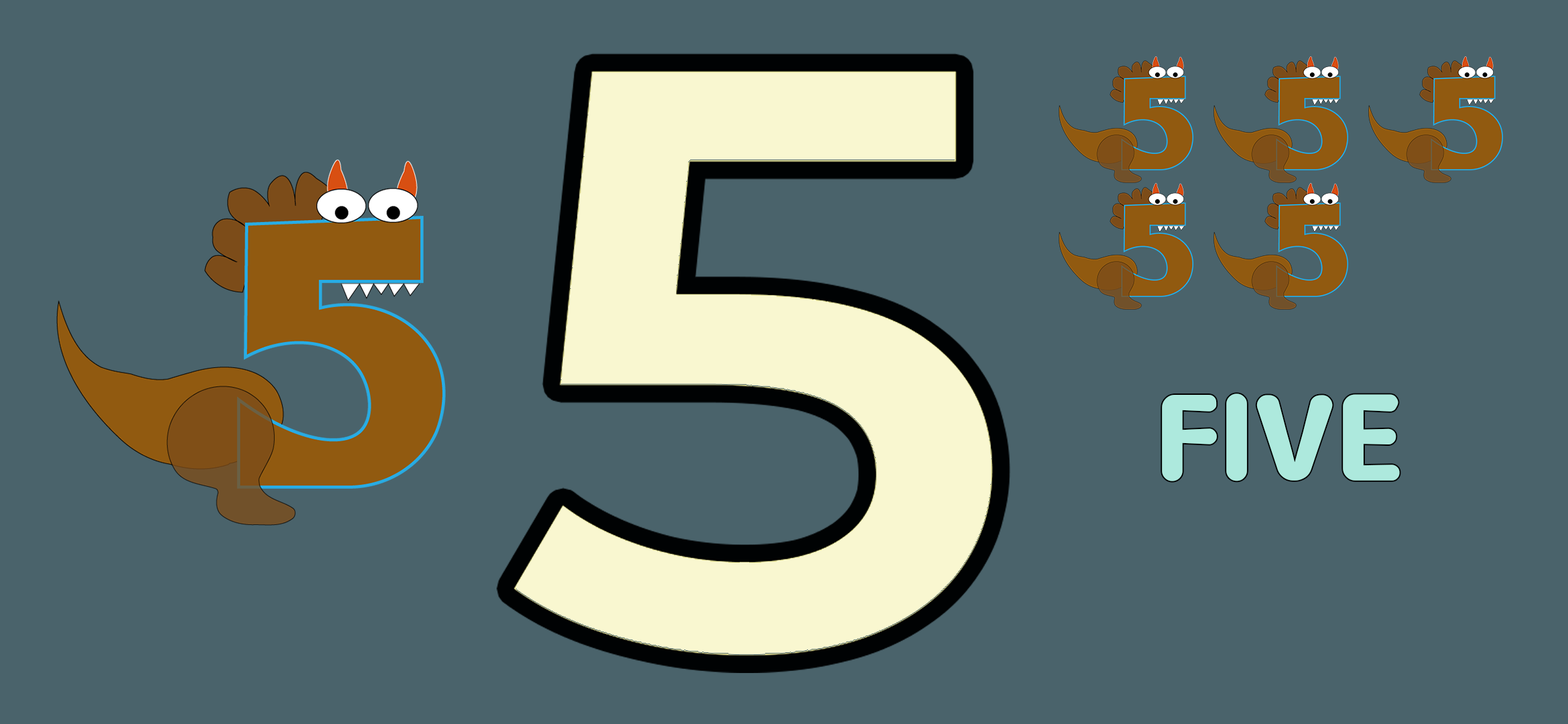
<style>
.page{position:relative;width:1568px;height:724px;background:#4a636b}
.page>*{position:absolute;margin:0}
.t1{font:139.6px "Dyuthi";color:#ade9dd}
</style>
<div class="page">
<p class="t1" style="left:1162px;top:393px;width:238px;height:88px">FIVE</p>
</div>
